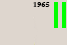
<style>
.page{position:relative;width:67px;height:45px;background:#ded6ce}
.page>*{position:absolute;margin:0}
.t1{font:10.3px "Aparajita-Bold";color:#000000}
</style>
<div class="page">
<p class="t1" style="left:33px;top:2px;width:17px;height:5px">1965</p>
</div>
